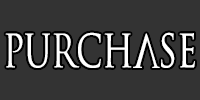
<style>
.page{position:relative;width:200px;height:100px;background:#333333}
.page>*{position:absolute;margin:0}
.t1{font:44.4px "SpaceandAstronomy";color:#ffffff;scale:0.74 1}
</style>
<div class="page">
<p class="t1" style="left:5px;top:32px;width:190px;height:36px">Purchase</p>
</div>
